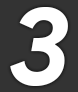
<style>
.page{position:relative;width:78px;height:92px;background:#333333}
.page>*{position:absolute;margin:0}
.t1{font:109.6px "ProductSans-BoldItalic";color:#ffffff}
</style>
<div class="page">
<p class="t1" style="left:10px;top:7px;width:58px;height:79px">3</p>
</div>
